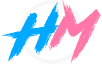
<style>
.page{position:relative;width:102px;height:64px;background:#ffffff}
.page>*{position:absolute;margin:0}
.t1{font:54.2px "RoadRage";letter-spacing:0.075em;color:#00a8ff}
.t2{font:54.2px "RoadRage";letter-spacing:0.075em;color:#ff77a9}
</style>
<div class="page">
<p class="t1" style="left:1px;top:1px;width:63px;height:61px">H</p>
<p class="t2" style="left:48px;top:0px;width:53px;height:64px">M</p>
</div>
